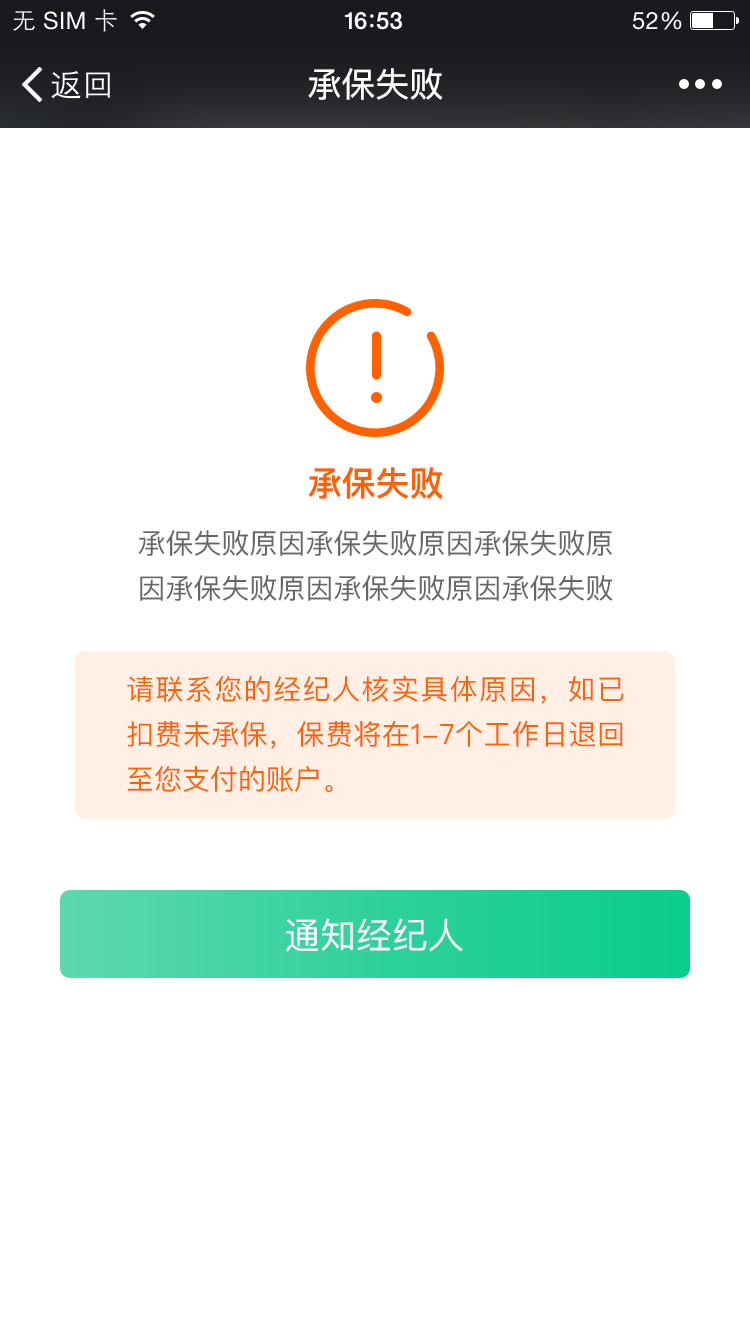
<style>
.page{position:relative;width:750px;height:1334px;background:#ffffff}
.page>*{position:absolute;margin:0}
.t1{font:34px "PingFangSC-Regular"}
.t2{font:34px "PingFangSC-Regular";color:#ffffff}
.t3{font:34px "PingFangSC-Medium";color:#ff6000}
.t4{font:28px/45px "PingFangSC-Regular";color:#666666}
.t5{font:28px/45px "PingFangSC-Regular";color:#ff6000}
.t6{font:36px "PingFangSC-Regular";color:#ffffff}
</style>
<div class="page">
<p class="t1" style="left:307px;top:68px;width:133px;height:32px">承保成功</p>
<p class="t1" style="left:307px;top:68px;width:133px;height:32px">承保成功</p>
<p class="t1" style="left:307px;top:68px;width:135px;height:32px">承保失败</p>
<p class="t1" style="left:307px;top:68px;width:135px;height:32px">承保失败</p>
<p class="t2" style="left:308px;top:68px;width:133px;height:32px">承保成功</p>
<p class="t2" style="left:308px;top:68px;width:135px;height:32px">承保失败</p>
<p class="t3" style="left:308px;top:467px;width:135px;height:32px">承保失败</p>
<p class="t3" style="left:308px;top:467px;width:135px;height:32px">承保失败</p>
<p class="t4" style="left:138px;top:530px;width:475px;height:71px;text-align:center">承保失败原因承保失败原因承保失败原因承保失败原因承保失败原因承保失败</p>
<p class="t5" style="left:127px;top:676px;width:497px;height:116px;text-align:justify">请联系您的经纪人核实具体原因，如已扣费未承保，保费将在1-7个工作日退回至您支付的账户。</p>
<p class="t6" style="left:286px;top:918px;width:177px;height:34px">通知经纪人</p>
</div>
